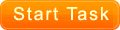
<style>
.page{position:relative;width:120px;height:30px}
.page>*{position:absolute;margin:0}
.t1{font:18px "ArialMT";letter-spacing:0.1em;color:#ffffcc}
</style>
<div class="page">
<p class="t1" style="left:13px;top:5px;width:98px;height:21px">Start Task</p>
</div>
